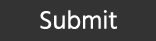
<style>
.page{position:relative;width:156px;height:41px;background:#333333}
.page>*{position:absolute;margin:0}
.t1{font:25.8px "Hind-Regular";color:#ffffff}
</style>
<div class="page">
<p class="t1" style="left:40px;top:10px;width:77px;height:19px">Submit</p>
</div>
